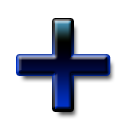
<style>
.page{position:relative;width:128px;height:128px;background:#ffffff}
.page>*{position:absolute;margin:0}
.t1{font:200px "Copperplate"}
</style>
<div class="page">
<p class="t1" style="left:19px;top:21px;width:89px;height:88px">+</p>
</div>
